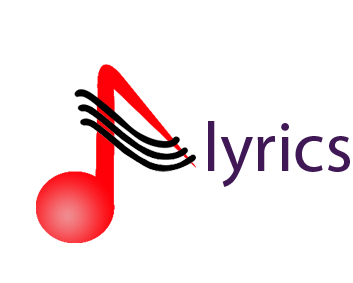
<style>
.page{position:relative;width:353px;height:283px;background:#ffffff}
.page>*{position:absolute;margin:0}
.t1{font:70.8px "MyriadHebrew-Regular";color:#3f1855}
</style>
<div class="page">
<p class="t1" style="left:208px;top:121px;width:142px;height:66px">lyrics</p>
</div>
